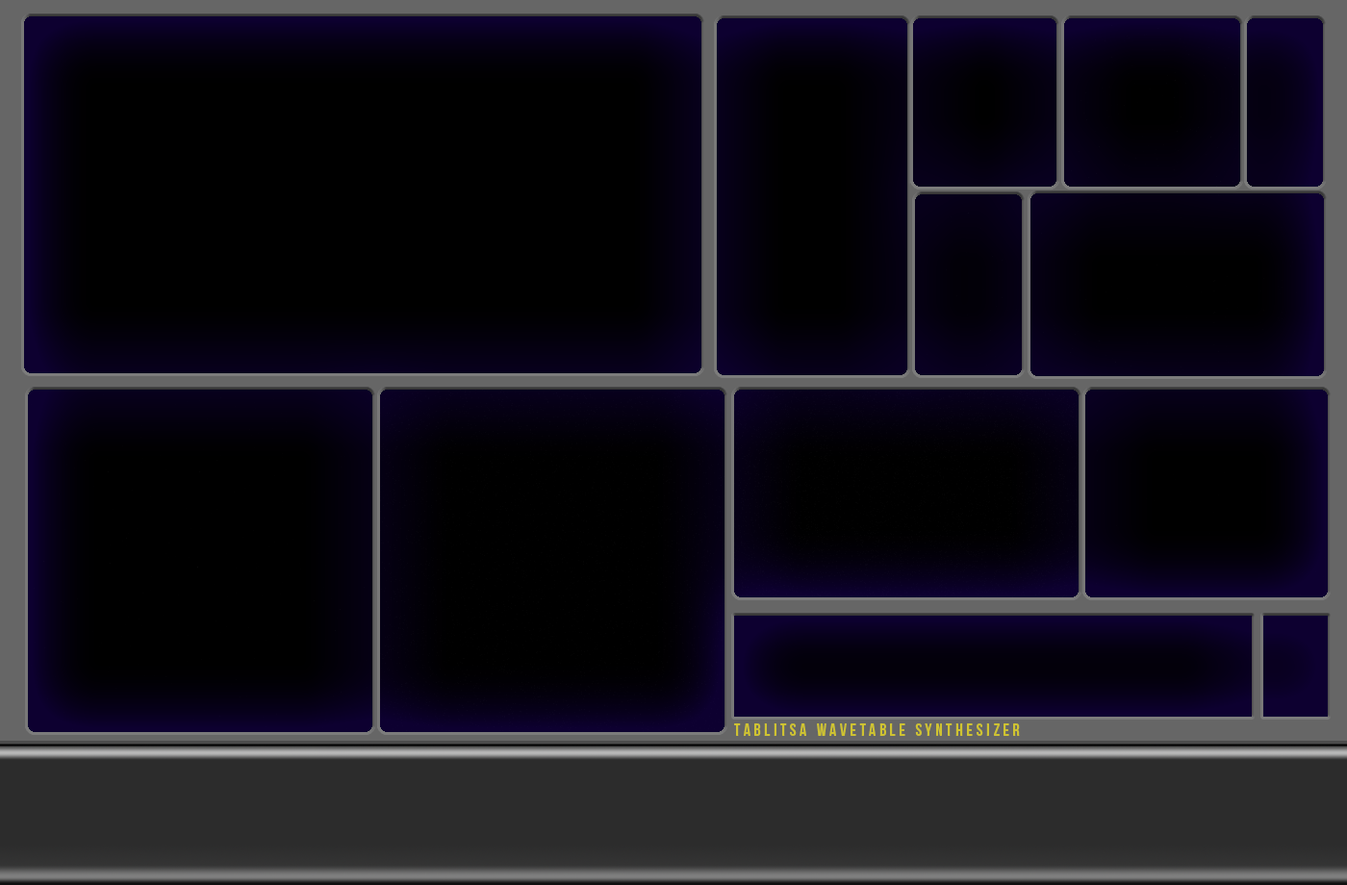
<style>
.page{position:relative;width:1347px;height:885px;background:#000000}
.page>*{position:absolute;margin:0}
.t1{font:17.3px "BebasNeue";letter-spacing:0.2em;color:#cfc331}
</style>
<div class="page">
<p class="t1" style="left:734px;top:724px;width:286px;height:12px">Tablitsa wavetable Synthesizer</p>
</div>
